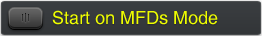
<style>
.page{position:relative;width:262px;height:36px}
.page>*{position:absolute;margin:0}
.t1{font:18px "Helvetica";color:#eefd00}
</style>
<div class="page">
<p class="t1" style="left:52px;top:10px;width:166px;height:15px">Start on MFDs Mode</p>
</div>
